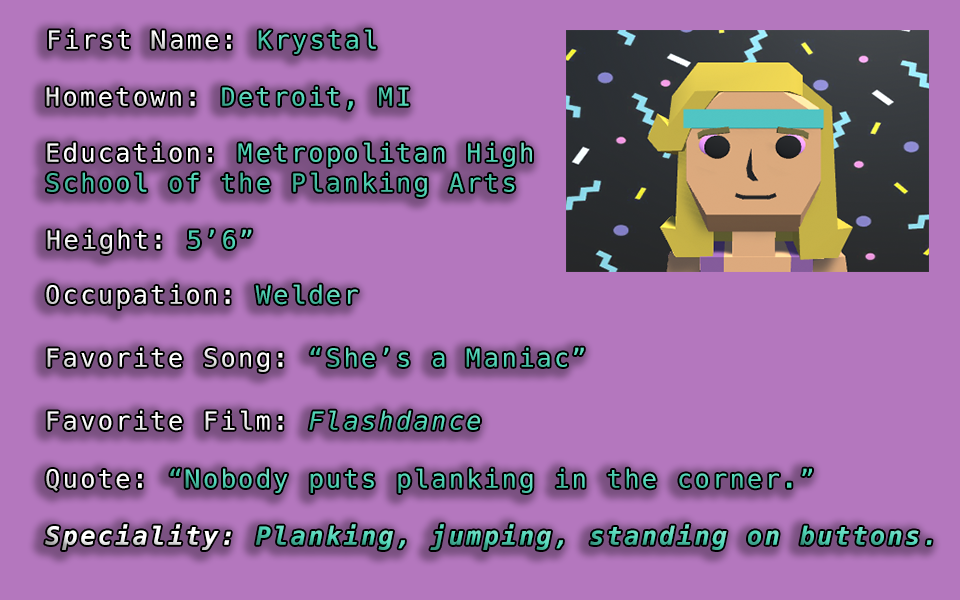
<style>
.page{position:relative;width:960px;height:600px;background:#b477be}
.page>*{position:absolute;margin:0}
.t1{font:25px "Menlo-Regular";letter-spacing:0.1em;color:#ffffff}
.t2{font:25px "Menlo-Regular";letter-spacing:0.1em;color:#50d7b8}
.t3{font:25px "Menlo-Italic";letter-spacing:0.1em;color:#50d7b8}
.t4{font:25px "Menlo-BoldItalic";letter-spacing:0.1em}
</style>
<div class="page">
<p class="t1" style="left:49px;top:29px;width:327px;height:25px">First Name: <span class="t2">Krystal</span></p>
<p class="t2" style="left:46px;top:86px;width:363px;height:24px"><span class="t1">Hometown: </span>Detroit, MI</p>
<p class="t2" style="left:46px;top:142px;width:486px;height:55px"><span class="t1">Education: </span>Metropolitan High<br>School of the Planking Arts</p>
<p class="t1" style="left:47px;top:229px;width:205px;height:25px">Height: <span class="t2">5’6”</span></p>
<p class="t1" style="left:46px;top:284px;width:312px;height:25px">Occupation: <span class="t2">Welder</span></p>
<p class="t2" style="left:47px;top:347px;width:537px;height:25px"><span class="t1">Favorite Song: </span>“She’s a Maniac”</p>
<p class="t1" style="left:47px;top:410px;width:433px;height:21px">Favorite Film: <span class="t3">Flashdance</span></p>
<p class="t2" style="left:46px;top:468px;width:766px;height:25px"><span class="t1">Quote: </span>“Nobody puts planking in the corner.”</p>
<p class="t4" style="left:45px;top:524px;width:887px;height:26px">Speciality: Planking, jumping, standing on buttons.</p>
</div>
